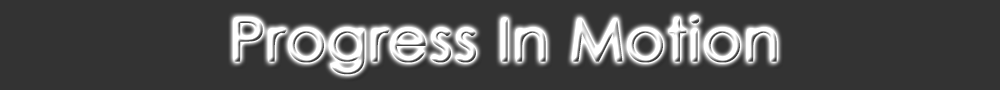
<style>
.page{position:relative;width:1000px;height:90px;background:#333333}
.page>*{position:absolute;margin:0}
.t1{font:60px "CenturyGothic";font-weight:bold}
</style>
<div class="page">
<p class="t1" style="left:234px;top:16px;width:543px;height:59px">Progress In Motion</p>
</div>
